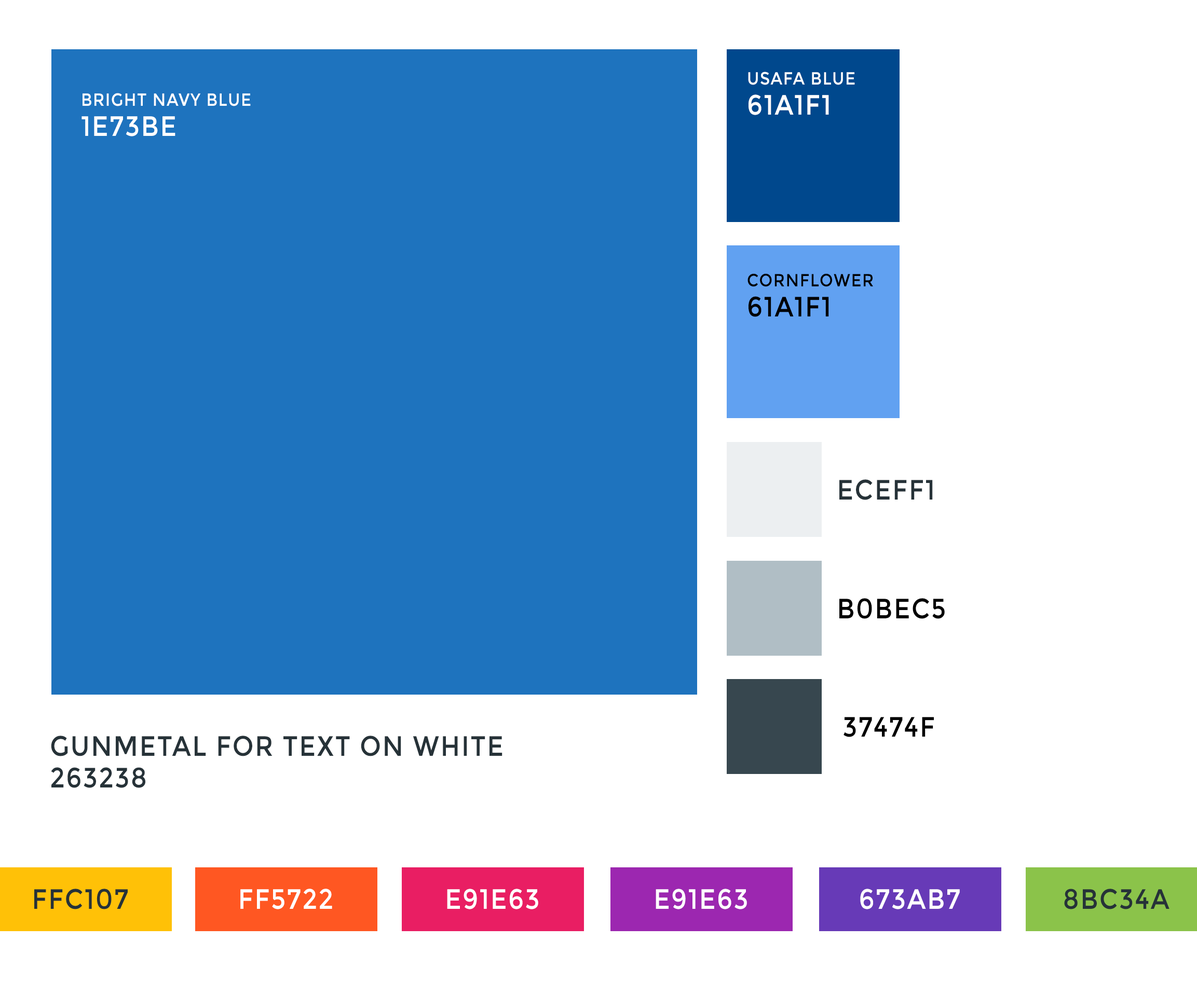
<style>
.page{position:relative;width:1197px;height:996px;background:#ffffff}
.page>*{position:absolute;margin:0}
.t1{font:17.6px "Montserrat-Regular";letter-spacing:0.05em;color:#ffffff;text-transform:uppercase;scale:0.9 1}
.t2{font:28px "Montserrat-Regular";letter-spacing:0.05em;color:#ffffff;text-transform:uppercase;scale:0.9 1}
.t3{font:17.6px "Montserrat-Regular";letter-spacing:0.05em;color:#000000;text-transform:uppercase;scale:0.9 1}
.t4{font:28px "Montserrat-Regular";letter-spacing:0.05em;color:#000000;text-transform:uppercase;scale:0.9 1}
.t5{font:28px "Montserrat-Regular";letter-spacing:0.05em;color:#263238;text-transform:uppercase;scale:0.9 1}
</style>
<div class="page">
<p class="t1" style="left:748px;top:72px;width:107px;height:13px">USAFA BLUE</p>
<p class="t1" style="left:83px;top:93px;width:168px;height:13px">Bright navy blue</p>
<p class="t2" style="left:748px;top:94px;width:81px;height:21px">61a1f1</p>
<p class="t2" style="left:81px;top:116px;width:94px;height:20px">1e73be</p>
<p class="t3" style="left:747px;top:273px;width:126px;height:14px">Cornflower</p>
<p class="t4" style="left:748px;top:296px;width:81px;height:21px">61a1f1</p>
<p class="t5" style="left:839px;top:480px;width:94px;height:20px">eceff1</p>
<p class="t4" style="left:839px;top:598px;width:106px;height:21px">b0bec5</p>
<p class="t4" style="left:843px;top:717px;width:91px;height:20px">37474f</p>
<p class="t5" style="left:51px;top:736px;width:451px;height:21px">gunmetal for text on white</p>
<p class="t5" style="left:51px;top:768px;width:94px;height:20px">263238</p>
<p class="t5" style="left:34px;top:889px;width:94px;height:21px">FFC107</p>
<p class="t2" style="left:240px;top:889px;width:92px;height:21px">ff5722</p>
<p class="t2" style="left:447px;top:889px;width:91px;height:21px">E91E63</p>
<p class="t2" style="left:655px;top:889px;width:92px;height:21px">E91E63</p>
<p class="t2" style="left:860px;top:889px;width:100px;height:21px">673AB7</p>
<p class="t5" style="left:1064px;top:889px;width:105px;height:21px">8BC34A</p>
</div>
